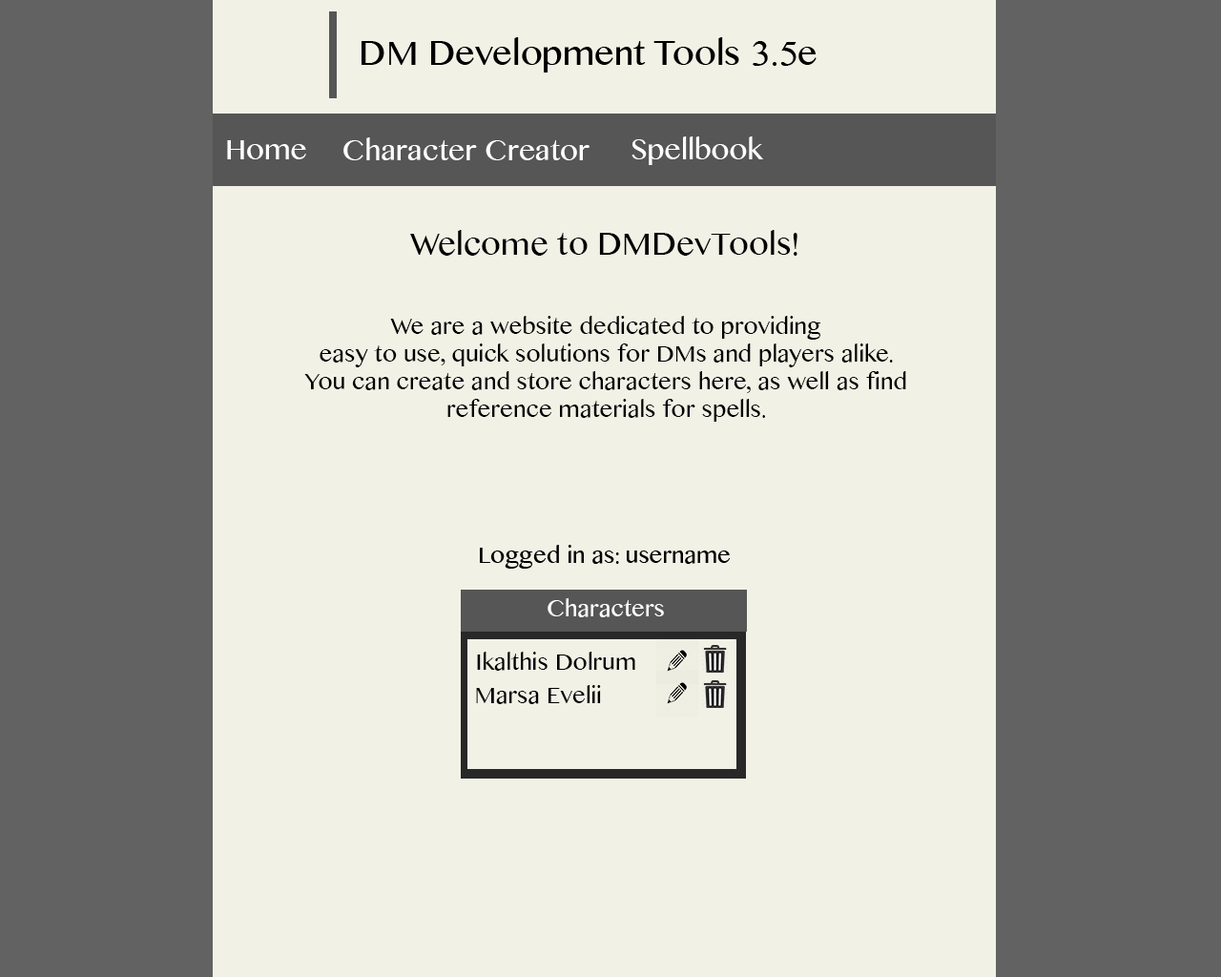
<style>
.page{position:relative;width:1221px;height:977px;background:#f1f1e6}
.page>*{position:absolute;margin:0}
.t1{font:31.5px "MyanmarMN";color:#000000}
.t2{font:22.9px "MyanmarMN";color:#000000}
</style>
<div class="page">
<p class="t1" style="left:410px;top:230px;width:387px;height:26px">Welcome to DMDevTools!</p>
<p class="t2" style="left:304px;top:316px;width:602px;height:106px;text-align:center">We are a website dedicated to providing<br>easy to use, quick solutions for DMs and players alike.<br>You can create and store characters here, as well as find<br>reference materials for spells.</p>
</div>
